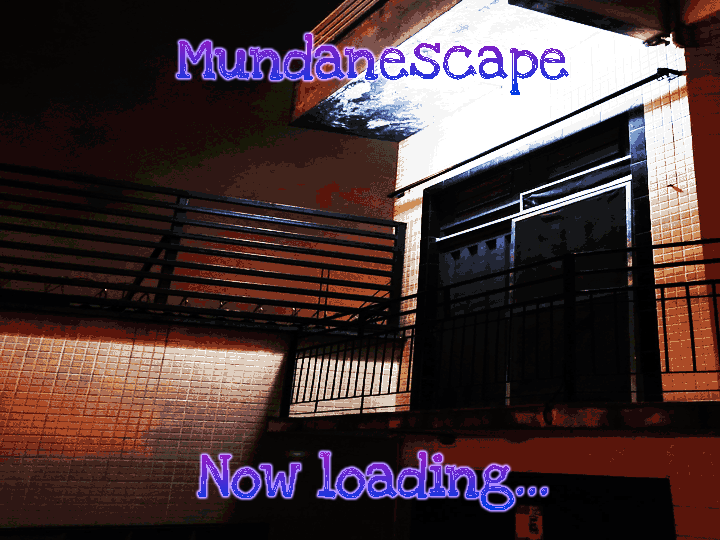
<style>
.page{position:relative;width:720px;height:540px}
.page>*{position:absolute;margin:0}
.t1{font:60px "LoveYaLikeASister-Regular"}
</style>
<div class="page">
<p class="t1" style="left:177px;top:34px;width:392px;height:61px">Mundanescape</p>
<p class="t1" style="left:198px;top:452px;width:349px;height:58px">Now loading...</p>
</div>
